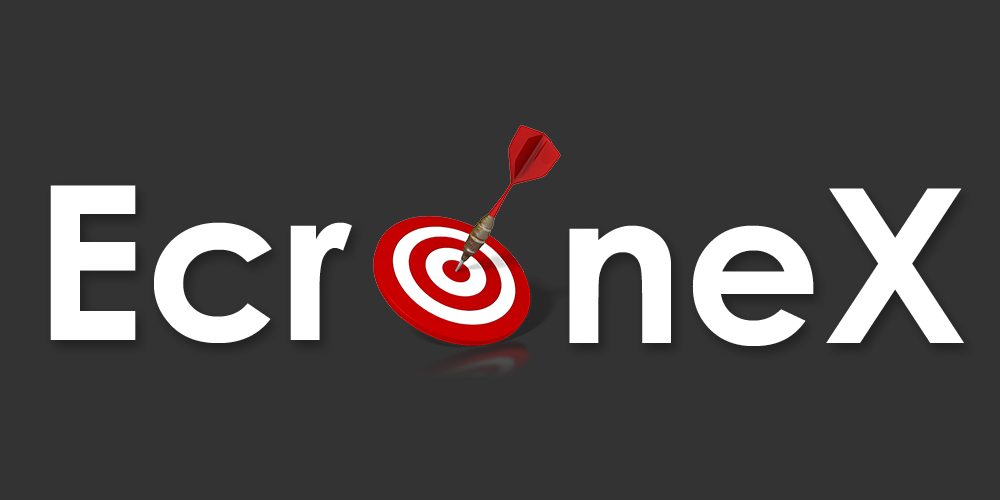
<style>
.page{position:relative;width:1000px;height:500px;background:#333333}
.page>*{position:absolute;margin:0}
.t1{font:215.3px "CenturyGothic-Bold";color:#ffffff}
</style>
<div class="page">
<p class="t1" style="left:50px;top:185px;width:302px;height:158px">Ecr</p>
<p class="t1" style="left:569px;top:188px;width:395px;height:158px">neX</p>
</div>
